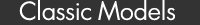
<style>
.page{position:relative;width:200px;height:25px;background:#333333}
.page>*{position:absolute;margin:0}
.t1{font:24px "LuzSans-Book";color:#ffffff}
</style>
<div class="page">
<p class="t1" style="left:19px;top:0px;width:156px;height:21px">Classic Models</p>
</div>
